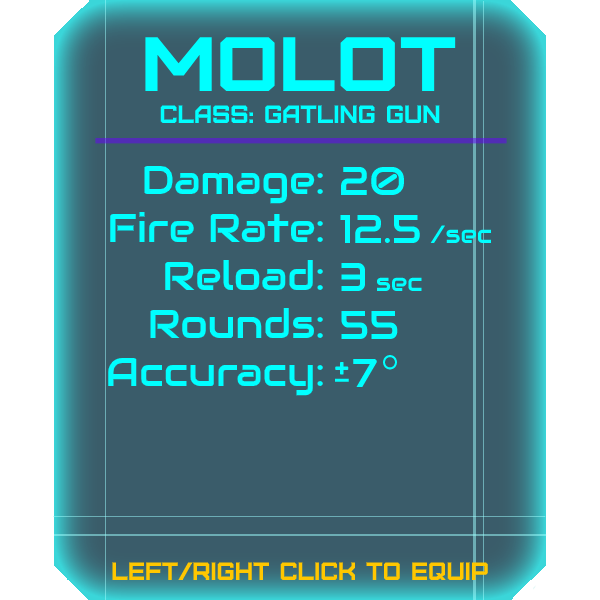
<style>
.page{position:relative;width:600px;height:600px;background:#3a5c6a}
.page>*{position:absolute;margin:0}
.t1{font:76.8px "Furore";color:#00ffff;scale:1.13 1}
.t2{font:25px "Furore";color:#00ffff}
.t3{font:40px "Audiowide-Regular";color:#00ffff}
.t4{font:25px "Audiowide-Regular";color:#00ffff}
.t5{font:25px "Furore";color:#ffc700}
</style>
<div class="page">
<p class="t1" style="left:145px;top:37px;width:311px;height:54px">Molot</p>
<p class="t2" style="left:160px;top:105px;width:280px;height:18px">Class: gatling gun</p>
<p class="t3" style="left:108px;top:165px;width:215px;height:231px;text-align:right">Damage:<br>Fire Rate:<br>Reload:<br>Rounds:<br>Accuracy:</p>
<p class="t3" style="left:340px;top:166px;width:152px;height:221px">20<br>12.5 <span class="t4">/sec<br></span>3 <span class="t4">sec<br></span>55<br> 7</p>
<p class="t5" style="left:112px;top:562px;width:376px;height:18px">left/right click to equip</p>
</div>
